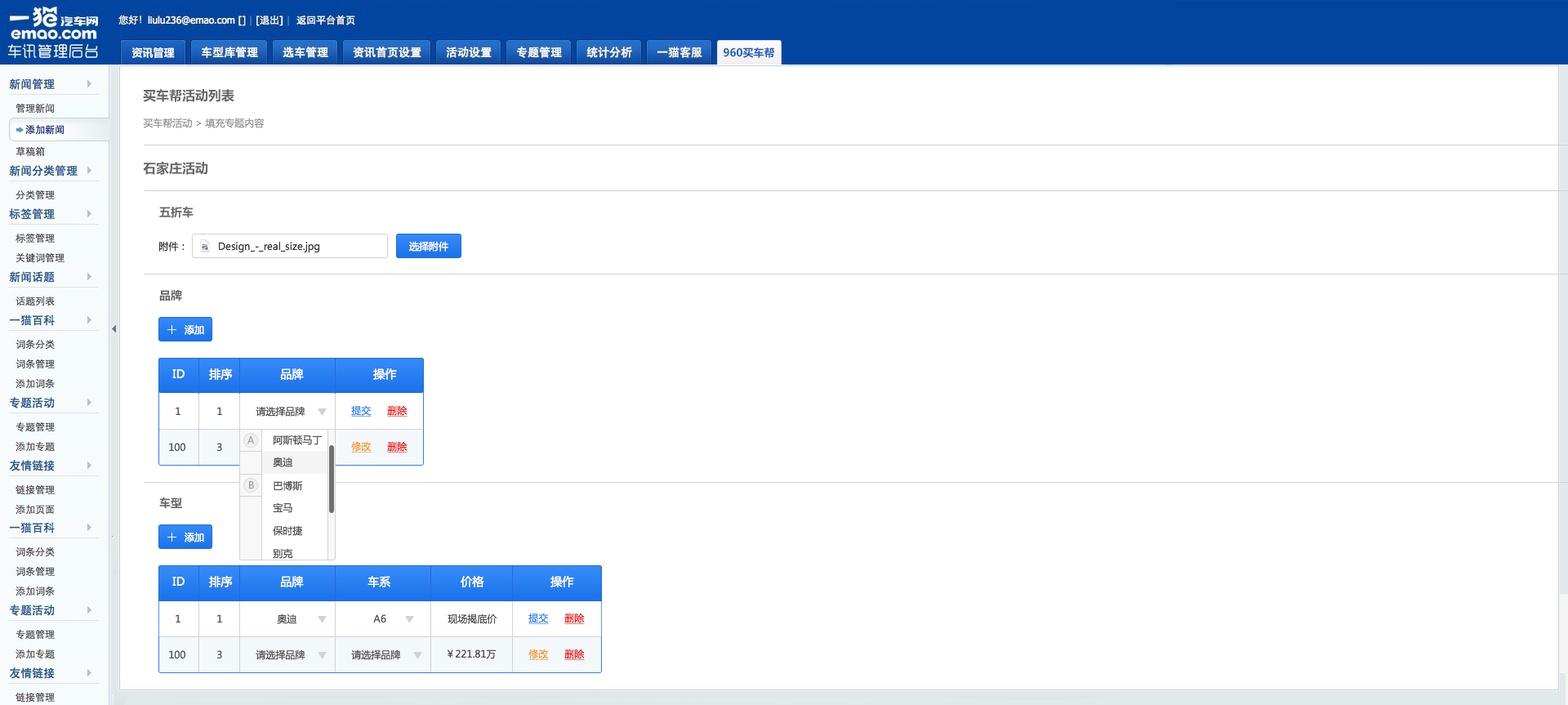
<style>
.page{position:relative;width:1568px;height:705px;background:#ffffff}
.page>*{position:absolute;margin:0}
.t1{font:10.6px "MicrosoftYaHei-Bold";color:#fefefe}
.t2{font:10.6px "MicrosoftYaHei-Bold";color:#175abb}
.t3{font:13.1px "MicrosoftYaHei-Bold";color:#666666}
.t4{font:9.8px "MicrosoftYaHei";color:#999999}
.t5{font:11.4px "MicrosoftYaHei-Bold";color:#666666}
.t6{font:9.8px "MicrosoftYaHei";color:#333333}
.t7{font:9.8px "MicrosoftYaHei";color:#ffffff}
.t8{font:11.4px "MicrosoftYaHei";color:#ffffff}
.t9{font:9.8px "MicrosoftYaHei";color:#535353}
.t10{font:9.8px "MicrosoftYaHei";color:#3287f7;text-decoration:underline}
.t11{font:9.8px "MicrosoftYaHei";color:#ec1616;text-decoration:underline}
.t12{font:9.8px "MicrosoftYaHei";color:#939393}
.t13{font:9.8px "MicrosoftYaHei";color:#f79d32;text-decoration:underline}
</style>
<div class="page">
<p class="t1" style="left:131px;top:47px;width:44px;height:11px">资讯管理</p>
<p class="t2" style="left:724px;top:47px;width:50px;height:11px">960买车帮</p>
<p class="t3" style="left:143px;top:89px;width:91px;height:13px">买车帮活动列表</p>
<p class="t4" style="left:143px;top:118px;width:122px;height:10px">买车帮活动 &gt; 填充专题内容</p>
<p class="t3" style="left:143px;top:162px;width:64px;height:13px">石家庄活动</p>
<p class="t5" style="left:159px;top:206px;width:35px;height:12px">五折车</p>
<p class="t6" style="left:158px;top:241px;width:27px;height:11px">附件：</p>
<p class="t6" style="left:219px;top:242px;width:101px;height:10px">Design_-_real_size.jpg</p>
<p class="t7" style="left:409px;top:241px;width:39px;height:11px">选择附件</p>
<p class="t5" style="left:159px;top:289px;width:23px;height:12px">品牌</p>
<p class="t7" style="left:185px;top:324px;width:19px;height:11px">添加</p>
<p class="t8" style="left:172px;top:369px;width:13px;height:9px">ID</p>
<p class="t8" style="left:209px;top:368px;width:24px;height:12px">排序</p>
<p class="t8" style="left:281px;top:368px;width:23px;height:12px">品牌</p>
<p class="t8" style="left:373px;top:368px;width:24px;height:12px">操作</p>
<p class="t9" style="left:176px;top:407px;width:4px;height:8px">1</p>
<p class="t9" style="left:217px;top:407px;width:5px;height:8px">1</p>
<p class="t9" style="left:256px;top:406px;width:49px;height:10px">请选择品牌</p>
<p class="t10" style="left:351px;top:405px;width:21px;height:11px">提交</p>
<p class="t11" style="left:387px;top:405px;width:21px;height:11px">删除</p>
<p class="t12" style="left:247px;top:436px;width:7px;height:8px">A</p>
<p class="t9" style="left:273px;top:434px;width:50px;height:11px">阿斯顿马丁</p>
<p class="t9" style="left:169px;top:443px;width:16px;height:9px">100</p>
<p class="t9" style="left:217px;top:443px;width:5px;height:9px">3</p>
<p class="t13" style="left:351px;top:441px;width:21px;height:11px">修改</p>
<p class="t11" style="left:387px;top:441px;width:21px;height:11px">删除</p>
<p class="t9" style="left:273px;top:457px;width:20px;height:10px">奥迪</p>
<p class="t12" style="left:249px;top:481px;width:5px;height:8px">B</p>
<p class="t9" style="left:274px;top:480px;width:29px;height:11px">巴博斯</p>
<p class="t5" style="left:159px;top:497px;width:23px;height:12px">车型</p>
<p class="t9" style="left:273px;top:502px;width:19px;height:11px">宝马</p>
<p class="t7" style="left:185px;top:532px;width:19px;height:10px">添加</p>
<p class="t9" style="left:273px;top:525px;width:30px;height:11px">保时捷</p>
<p class="t9" style="left:273px;top:548px;width:20px;height:11px">别克</p>
<p class="t8" style="left:172px;top:577px;width:13px;height:9px">ID</p>
<p class="t8" style="left:209px;top:575px;width:24px;height:12px">排序</p>
<p class="t8" style="left:281px;top:576px;width:23px;height:11px">品牌</p>
<p class="t8" style="left:368px;top:576px;width:22px;height:11px">车系</p>
<p class="t8" style="left:461px;top:576px;width:23px;height:11px">价格</p>
<p class="t8" style="left:550px;top:576px;width:24px;height:11px">操作</p>
<p class="t9" style="left:176px;top:614px;width:4px;height:8px">1</p>
<p class="t9" style="left:217px;top:614px;width:5px;height:8px">1</p>
<p class="t9" style="left:277px;top:613px;width:20px;height:11px">奥迪</p>
<p class="t9" style="left:373px;top:614px;width:13px;height:9px">A6</p>
<p class="t9" style="left:448px;top:613px;width:49px;height:11px">现场揭底价</p>
<p class="t10" style="left:528px;top:612px;width:21px;height:12px">提交</p>
<p class="t11" style="left:564px;top:612px;width:21px;height:12px">删除</p>
<p class="t9" style="left:169px;top:650px;width:16px;height:9px">100</p>
<p class="t9" style="left:217px;top:650px;width:5px;height:9px">3</p>
<p class="t9" style="left:256px;top:649px;width:49px;height:11px">请选择品牌</p>
<p class="t9" style="left:351px;top:649px;width:50px;height:11px">请选择品牌</p>
<p class="t9" style="left:448px;top:649px;width:49px;height:10px">￥221.81万</p>
<p class="t13" style="left:528px;top:648px;width:21px;height:12px">修改</p>
<p class="t11" style="left:564px;top:648px;width:21px;height:12px">删除</p>
</div>
